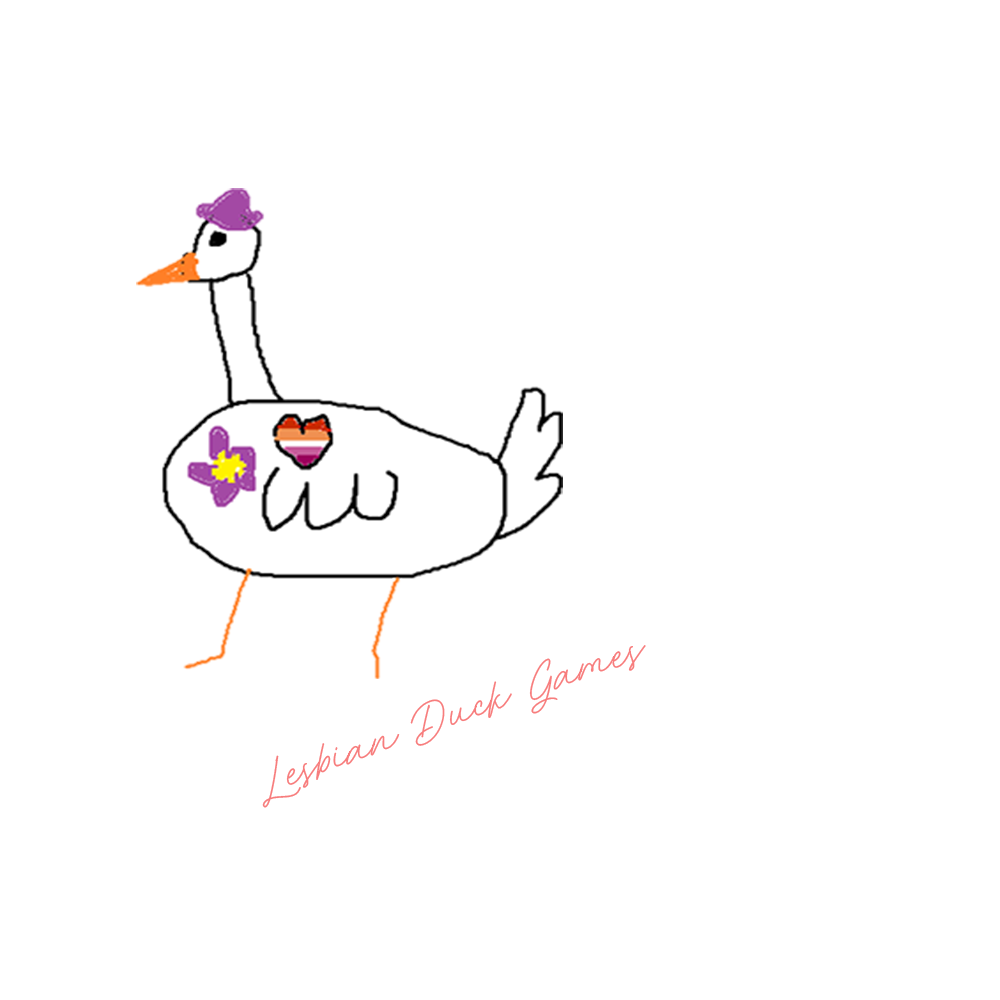
<style>
.page{position:relative;width:1000px;height:1000px;background:#ffffff}
.page>*{position:absolute;margin:0}
.t1{font:30px "RocketCloudsDEMO-Regular";color:#f77d7d}
</style>
<div class="page">
<p class="t1" style="left:262px;top:645px;width:384px;height:163px;rotate:-20deg">Lesbian Duck Games</p>
</div>
